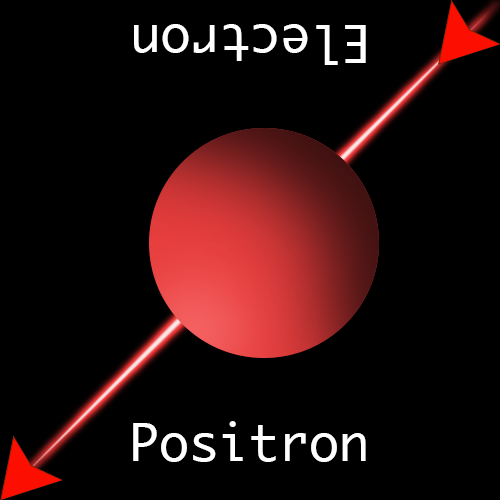
<style>
.page{position:relative;width:500px;height:500px;background:#000000}
.page>*{position:absolute;margin:0}
.t1{font:50px "Ayuthaya";color:#ffffff}
</style>
<div class="page">
<p class="t1" style="left:134px;top:24px;width:232px;height:41px;rotate:180deg">Electron</p>
<p class="t1" style="left:133px;top:421px;width:233px;height:41px">Positron</p>
</div>
